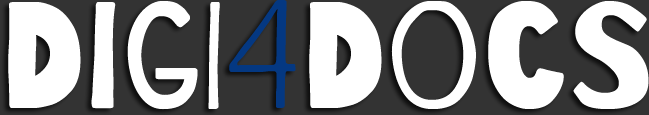
<style>
.page{position:relative;width:649px;height:115px;background:#ffffff}
.page>*{position:absolute;margin:0}
.t1{font:150px "Barrio-Regular";color:#ffffff}
.t2{font:150px "Barrio-Regular";color:#043882}
</style>
<div class="page">
<p class="t1" style="left:8px;top:0px;width:641px;height:110px">Digi<span class="t2">4</span>Docs</p>
</div>
